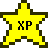
<style>
.page{position:relative;width:48px;height:48px;background:#ffff00}
.page>*{position:absolute;margin:0}
.t1{font:20px "Fixedsys";color:#000000}
</style>
<div class="page">
<p class="t1" style="left:18px;top:21px;width:14px;height:9px">XP</p>
</div>
